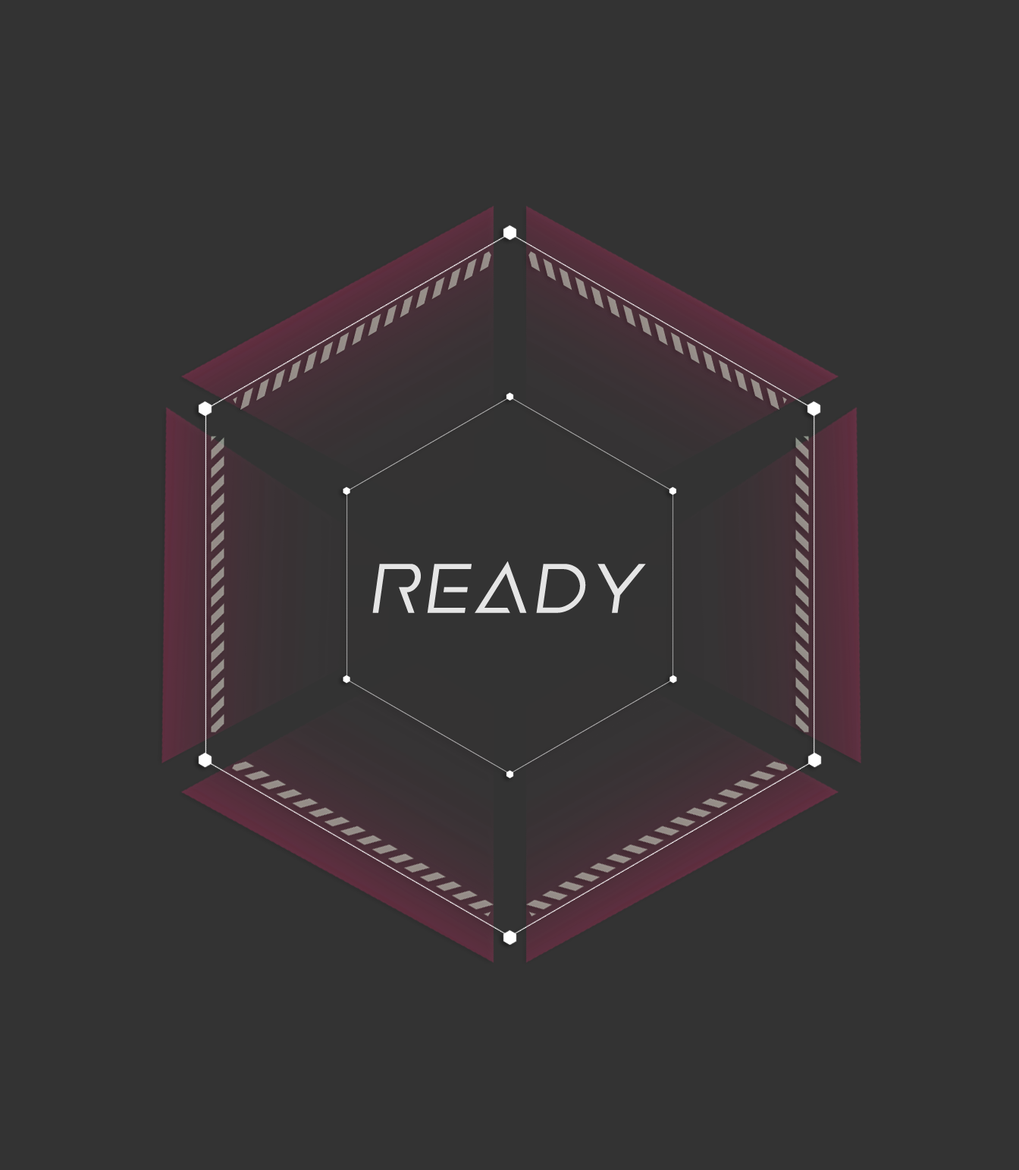
<style>
.page{position:relative;width:1019px;height:1170px;background:#333333}
.page>*{position:absolute;margin:0}
.t1{font:78.1px "EarthOrbiterSemi-Italic";letter-spacing:0.02em;color:#e5e5e5}
</style>
<div class="page">
<p class="t1" style="left:372px;top:561px;width:274px;height:52px">READY</p>
</div>
